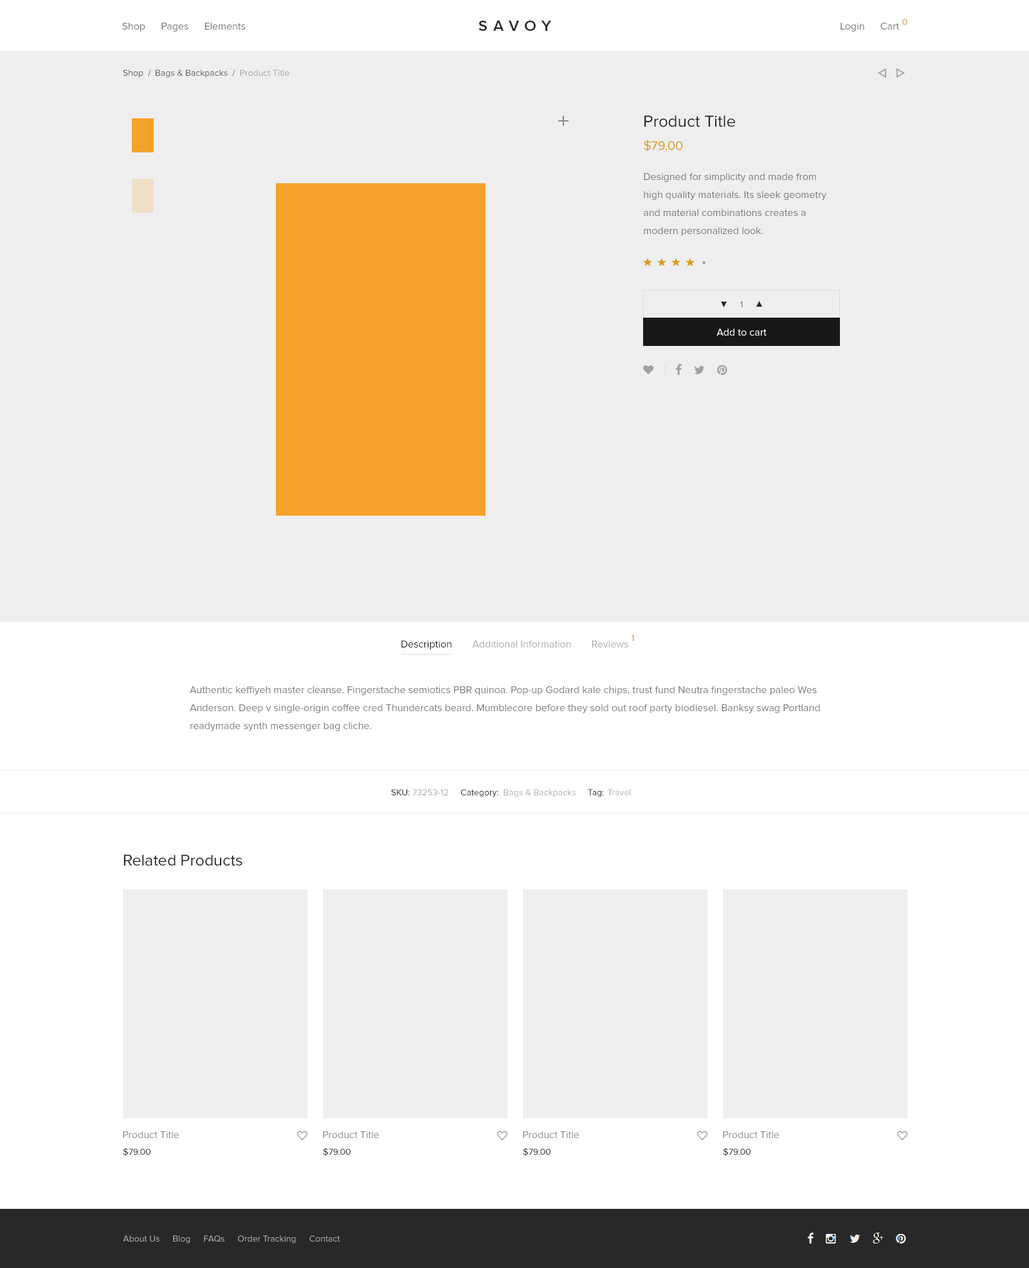
<style>
.page{position:relative;width:1029px;height:1268px;background:#eeeeee}
.page>*{position:absolute;margin:0}
.t1{font:10.3px "ProximaNova-Regular";color:#707070}
.t2{font:15.4px "ProximaNova-Semibold";letter-spacing:0.37em;color:#282828;text-transform:uppercase}
.t3{font:9px "ProximaNova-Regular";color:#dc9814}
.t4{font:9px "ProximaNova-Regular";color:#555555}
.t5{font:9px "ProximaNova-Regular"}
.t6{font:9px "ProximaNova-Regular";color:#a1a1a1}
.t7{font:16.7px "ProximaNova-Regular";color:#282828}
.t8{font:12.9px "ProximaNova-Regular";color:#dc9814}
.t9{font:10.3px/18px "ProximaNova-Regular";color:#777777}
.t10{font:9px "ProximaNova-Regular";color:#777777}
.t11{font:10.3px "ProximaNova-Regular";color:#ffffff}
.t12{font:10.3px "ProximaNova-Regular";color:#181818}
.t13{font:10.3px "ProximaNova-Regular";color:#aaaaaa}
.t14{font:9px "ProximaNova-Regular";color:#181818}
.t15{font:9px "ProximaNova-Regular";color:#aaaaaa}
.t16{font:16.1px "ProximaNova-Regular";color:#282828}
.t17{font:10.3px "ProximaNova-Regular";color:#8c8c8c}
</style>
<div class="page">
<p class="t1" style="left:122px;top:22px;width:23px;height:10px">Shop</p>
<p class="t1" style="left:161px;top:22px;width:27px;height:10px">Pages</p>
<p class="t1" style="left:204px;top:22px;width:42px;height:8px">Elements</p>
<p class="t2" style="left:478px;top:21px;width:73px;height:10px">savoy</p>
<p class="t1" style="left:840px;top:22px;width:24px;height:10px">Login</p>
<p class="t1" style="left:880px;top:22px;width:19px;height:8px">Cart</p>
<p class="t3" style="left:902px;top:19px;width:5px;height:6px">0</p>
<p class="t4" style="left:123px;top:69px;width:20px;height:9px">Shop</p>
<p class="t5" style="left:148px;top:69px;width:3px;height:7px">/</p>
<p class="t4" style="left:156px;top:69px;width:72px;height:9px">Bags &amp; Backpacks</p>
<p class="t5" style="left:232px;top:69px;width:3px;height:7px">/</p>
<p class="t6" style="left:240px;top:69px;width:49px;height:7px">Product Title</p>
<p class="t7" style="left:644px;top:115px;width:91px;height:12px">Product Title</p>
<p class="t8" style="left:644px;top:140px;width:39px;height:11px">$79.00</p>
<p class="t9" style="left:644px;top:173px;width:182px;height:63px;text-align:right">Designed for simplicity and made from<br>high quality materials. Its sleek geometry<br>and material combinations creates a<br>modern personalized look.</p>
<p class="t10" style="left:739px;top:301px;width:3px;height:6px">1</p>
<p class="t11" style="left:716px;top:328px;width:50px;height:8px">Add to cart</p>
<p class="t12" style="left:401px;top:640px;width:50px;height:9px">Description</p>
<p class="t13" style="left:472px;top:640px;width:99px;height:7px">Additional Information</p>
<p class="t13" style="left:591px;top:640px;width:37px;height:7px">Reviews</p>
<p class="t3" style="left:631px;top:634px;width:3px;height:7px">1</p>
<p class="t9" style="left:190px;top:686px;width:630px;height:45px;text-align:right">Authentic keffiyeh master cleanse. Fingerstache semiotics PBR quinoa. Pop-up Godard kale chips, trust fund Neutra fingerstache paleo Wes <br>Anderson. Deep v single-origin coffee cred Thundercats beard. Mumblecore before they sold out roof party biodiesel. Banksy swag Portland <br>readymade synth messenger bag cliche.</p>
<p class="t14" style="left:391px;top:789px;width:19px;height:6px">SKU:</p>
<p class="t15" style="left:412px;top:789px;width:36px;height:6px">73253-12</p>
<p class="t14" style="left:460px;top:789px;width:38px;height:8px">Category:</p>
<p class="t15" style="left:503px;top:789px;width:72px;height:8px">Bags &amp; Backpacks</p>
<p class="t14" style="left:588px;top:789px;width:16px;height:8px">Tag:</p>
<p class="t15" style="left:608px;top:789px;width:23px;height:6px">Travel</p>
<p class="t16" style="left:123px;top:854px;width:119px;height:12px">Related Products</p>
<p class="t17" style="left:123px;top:1131px;width:56px;height:7px">Product Title</p>
<p class="t17" style="left:323px;top:1131px;width:56px;height:7px">Product Title</p>
<p class="t17" style="left:523px;top:1131px;width:56px;height:7px">Product Title</p>
<p class="t17" style="left:723px;top:1131px;width:56px;height:7px">Product Title</p>
<p class="t14" style="left:123px;top:1148px;width:27px;height:8px">$79.00</p>
<p class="t14" style="left:323px;top:1148px;width:27px;height:8px">$79.00</p>
<p class="t14" style="left:523px;top:1148px;width:27px;height:8px">$79.00</p>
<p class="t14" style="left:723px;top:1148px;width:27px;height:8px">$79.00</p>
<p class="t15" style="left:123px;top:1235px;width:36px;height:6px">About Us</p>
<p class="t15" style="left:173px;top:1235px;width:17px;height:8px">Blog</p>
<p class="t15" style="left:204px;top:1235px;width:20px;height:7px">FAQs</p>
<p class="t15" style="left:238px;top:1235px;width:58px;height:8px">Order Tracking</p>
<p class="t15" style="left:309px;top:1235px;width:31px;height:6px">Contact</p>
</div>
